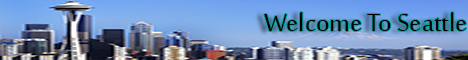
<style>
.page{position:relative;width:468px;height:60px}
.page>*{position:absolute;margin:0}
.t1{font:34px "SakkalMajalla";color:#000000}
</style>
<div class="page">
<p class="t1" style="left:264px;top:12px;width:203px;height:19px">Welcome To Seattle</p>
</div>
